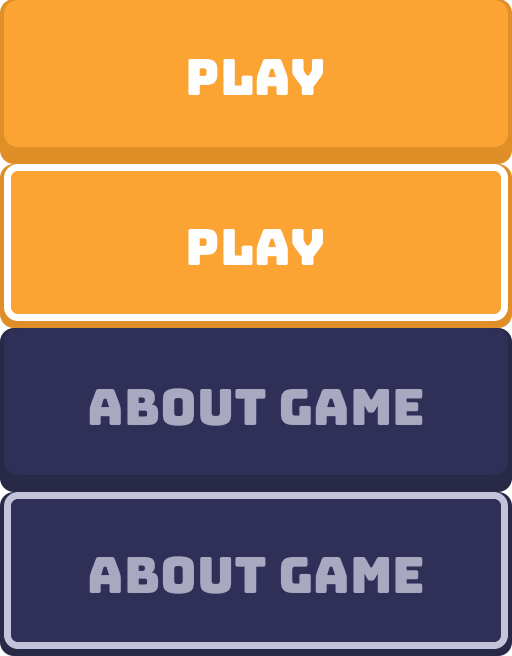
<style>
.page{position:relative;width:512px;height:656px;background:#fba434}
.page>*{position:absolute;margin:0}
.t1{font:50px "Bungee-Regular";color:#fefefe}
.t2{font:50px "Bungee-Regular";color:#a8a8c1}
</style>
<div class="page">
<p class="t1" style="left:188px;top:59px;width:135px;height:36px">Play</p>
<p class="t1" style="left:188px;top:229px;width:135px;height:36px">Play</p>
<p class="t2" style="left:89px;top:388px;width:334px;height:38px">About game</p>
<p class="t2" style="left:89px;top:556px;width:334px;height:38px">About game</p>
</div>
